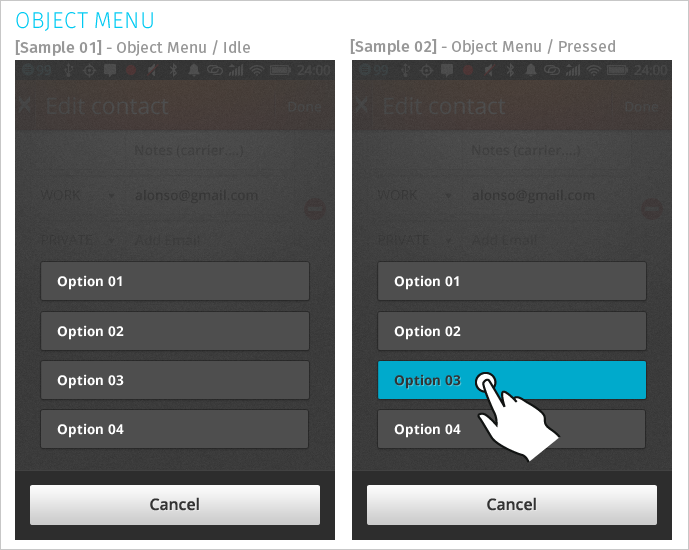
<style>
.page{position:relative;width:689px;height:550px}
.page>*{position:absolute;margin:0}
.t1{font:22.9px "MozLight";color:#00caf2;text-transform:uppercase}
.t2{font:15.8px "Moz";color:#989898}
.t3{font:15.8px "MozMedium";color:#989898}
.t4{font:13.6px "OpenSans-Bold";color:#ffffff}
.t5{font:13.6px "OpenSans-Bold";color:#333333}
.t6{font:15.8px "OpenSans-Semibold";color:#333333}
</style>
<div class="page">
<p class="t1" style="left:16px;top:12px;width:137px;height:19px">object menu</p>
<p class="t2" style="left:15px;top:40px;width:235px;height:16px"><span class="t3">[Sample 01]</span> - Object Menu / Idle</p>
<p class="t2" style="left:350px;top:39px;width:265px;height:16px"><span class="t3">[Sample 02]</span> - Object Menu / Pressed</p>
<p class="t4" style="left:57px;top:275px;width:65px;height:15px">Option 01</p>
<p class="t4" style="left:394px;top:275px;width:65px;height:15px">Option 01</p>
<p class="t4" style="left:57px;top:325px;width:67px;height:15px">Option 02</p>
<p class="t4" style="left:394px;top:325px;width:67px;height:15px">Option 02</p>
<p class="t4" style="left:57px;top:374px;width:67px;height:15px">Option 03</p>
<p class="t5" style="left:394px;top:374px;width:67px;height:15px">Option 03</p>
<p class="t4" style="left:57px;top:423px;width:67px;height:15px">Option 04</p>
<p class="t4" style="left:394px;top:423px;width:67px;height:15px">Option 04</p>
<p class="t6" style="left:150px;top:497px;width:49px;height:14px">Cancel</p>
<p class="t6" style="left:487px;top:497px;width:49px;height:14px">Cancel</p>
</div>
